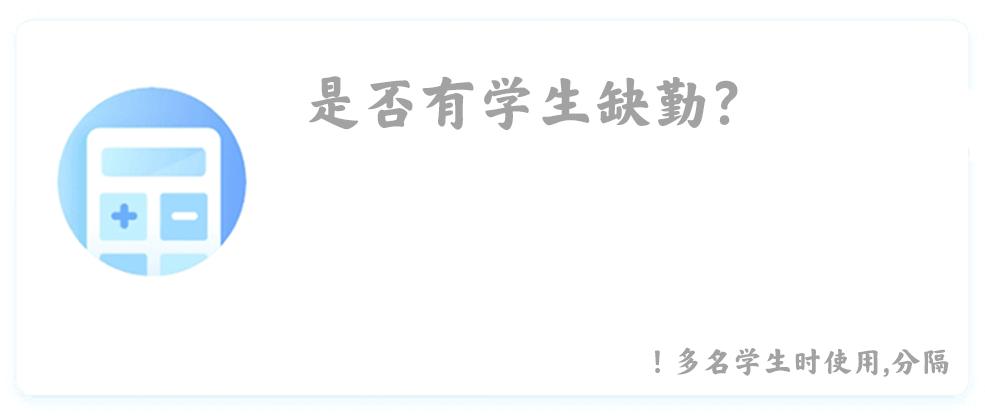
<style>
.page{position:relative;width:985px;height:419px;background:#ffffff}
.page>*{position:absolute;margin:0}
.t1{font:58px "COCA-COLACAREFONTKAITI--GB1-0";color:#a2a2a2}
.t2{font:30px "COCA-COLACAREFONTKAITI--GB1-0";color:#a2a2a2}
</style>
<div class="page">
<p class="t1" style="left:309px;top:76px;width:429px;height:55px">是否有学生缺勤？</p>
<p class="t2" style="left:655px;top:347px;width:294px;height:30px">！多名学生时使用,分隔</p>
</div>
